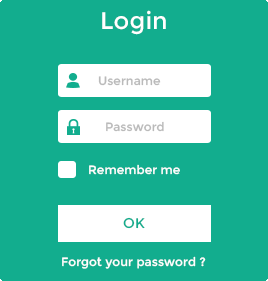
<style>
.page{position:relative;width:268px;height:281px;background:#12ad8e}
.page>*{position:absolute;margin:0}
.t1{font:24px "Montserrat-Regular";letter-spacing:0.01em;color:#ffffff}
.t2{font:12px "Montserrat-Regular";letter-spacing:0.01em;color:#bababa}
.t3{font:12px "Montserrat-Regular";letter-spacing:0.01em;color:#ffffff}
.t4{font:14px "Montserrat-Regular";letter-spacing:0.01em;color:#12ad8e}
</style>
<div class="page">
<p class="t1" style="left:102px;top:10px;width:64px;height:25px">Login</p>
<p class="t2" style="left:98px;top:76px;width:63px;height:10px">Username</p>
<p class="t2" style="left:106px;top:121px;width:58px;height:11px">Password</p>
<p class="t3" style="left:89px;top:164px;width:91px;height:11px">Remember me</p>
<p class="t4" style="left:123px;top:217px;width:22px;height:12px">OK</p>
<p class="t3" style="left:62px;top:256px;width:144px;height:13px">Forgot your password ?</p>
</div>
